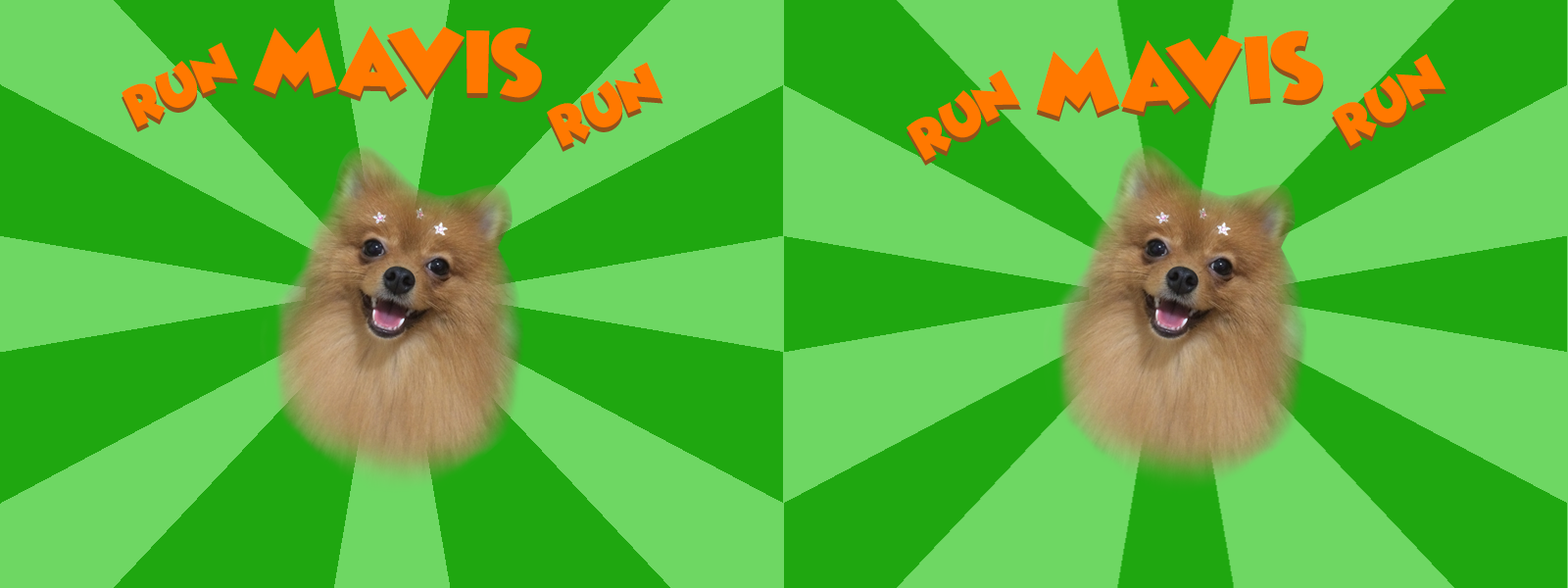
<style>
.page{position:relative;width:1568px;height:588px;background:#6ed763}
.page>*{position:absolute;margin:0}
.t1{font:27.5px "WickedMouse";color:#ff7800}
.t2{font:16.8px "WickedMouse";color:#ff7800}
</style>
<div class="page">
<p class="t1" style="left:1036px;top:35px;width:288px;height:87px;rotate:-5deg">mavis</p>
<p class="t1" style="left:1036px;top:30px;width:288px;height:87px;rotate:-5deg">mavis</p>
<p class="t2" style="left:1332px;top:54px;width:114px;height:92px;rotate:-32deg">RUN</p>
<p class="t2" style="left:1332px;top:59px;width:114px;height:92px;rotate:-32deg">RUN</p>
<p class="t2" style="left:906px;top:74px;width:115px;height:92px;rotate:-32deg">RUN</p>
<p class="t2" style="left:906px;top:70px;width:114px;height:91px;rotate:-32deg">RUN</p>
</div>
